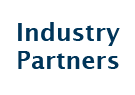
<style>
.page{position:relative;width:135px;height:95px;background:#ffffff}
.page>*{position:absolute;margin:0}
.t1{font:24px "LucidaSans-Demi";color:#003559}
</style>
<div class="page">
<p class="t1" style="left:18px;top:22px;width:102px;height:47px;text-align:center">Industry<br>Partners</p>
</div>
